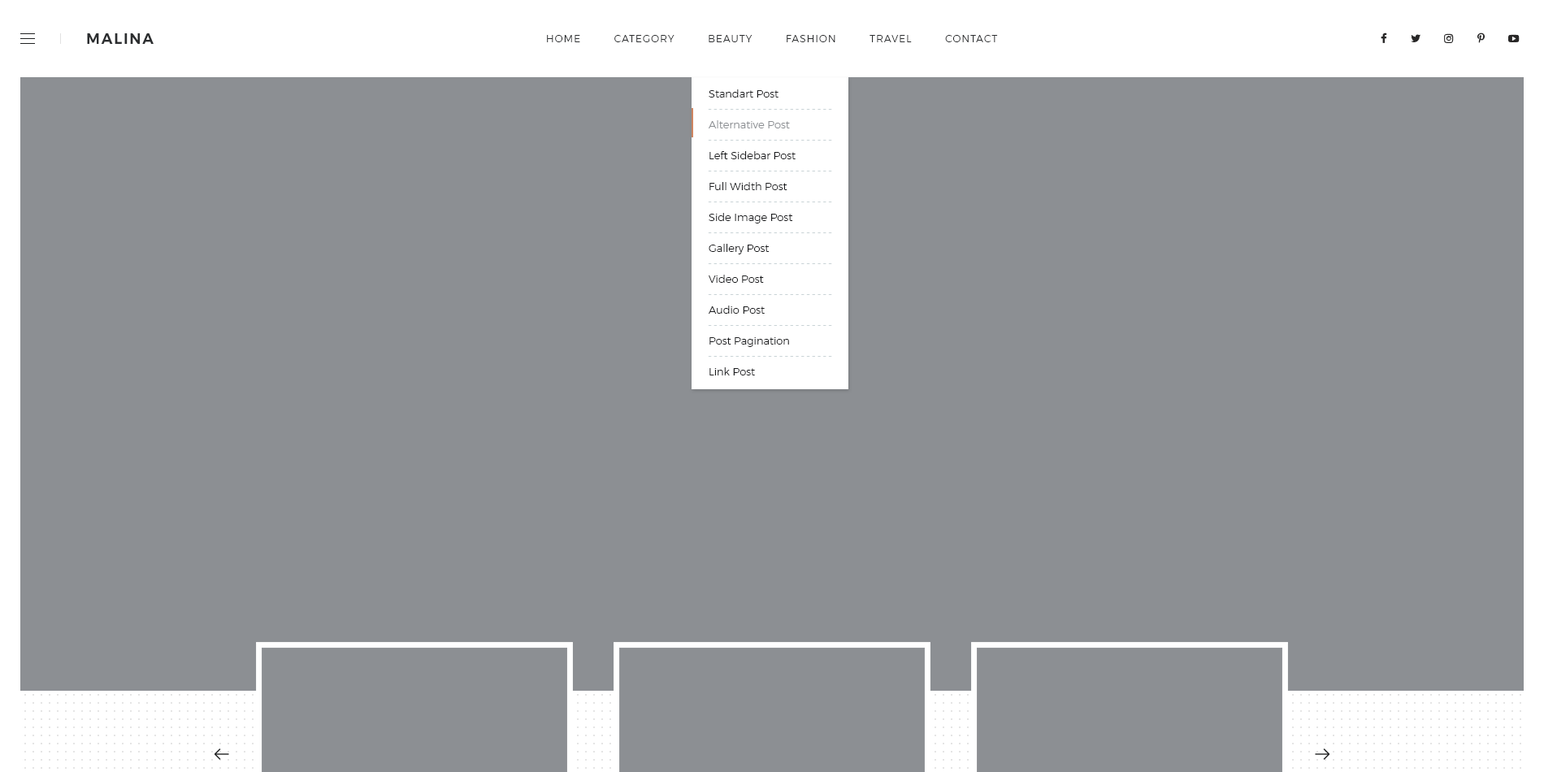
<style>
.page{position:relative;width:1544px;height:772px;background:#8c8f93}
.page>*{position:absolute;margin:0}
.t1{font:14.6px "Montserrat-SemiBold";letter-spacing:0.1em;color:#2c2e30;text-transform:uppercase}
.t2{font:9.8px "Montserrat-Light";letter-spacing:0.1em;color:#2c2e30;text-transform:uppercase}
.t3{font:10.6px/30.9px "Montserrat-Light";color:#1c1d1f}
.t4{font:10.6px/30.9px "Montserrat-Light";color:#8c8f93}
.t5{font:10.6px "OpenSans";letter-spacing:0.195em;color:#c9d3d6}
</style>
<div class="page">
<p class="t1" style="left:87px;top:33px;width:67px;height:11px">Malina</p>
<p class="t2" style="left:547px;top:35px;width:451px;height:7px">Home         Category         Beauty         Fashion         Travel         Contact</p>
<p class="t3" style="left:708px;top:89px;width:88px;height:287px">Standart Post<br><span class="t4">Alternative Post<br></span>Left Sidebar Post<br>Full Width Post<br>Side Image Post<br>Gallery Post<br>Video Post<br>Audio Post<br>Post Pagination<br>Link Post</p>
<p class="t5" style="left:708px;top:109px;width:124px;height:1px">-----------------------</p>
<p class="t5" style="left:708px;top:140px;width:124px;height:1px">-----------------------</p>
<p class="t5" style="left:708px;top:171px;width:124px;height:0px">-----------------------</p>
<p class="t5" style="left:708px;top:202px;width:124px;height:0px">-----------------------</p>
<p class="t5" style="left:708px;top:232px;width:124px;height:1px">-----------------------</p>
<p class="t5" style="left:708px;top:263px;width:124px;height:1px">-----------------------</p>
<p class="t5" style="left:708px;top:294px;width:124px;height:1px">-----------------------</p>
<p class="t5" style="left:708px;top:325px;width:124px;height:1px">-----------------------</p>
<p class="t5" style="left:708px;top:356px;width:124px;height:1px">-----------------------</p>
</div>
